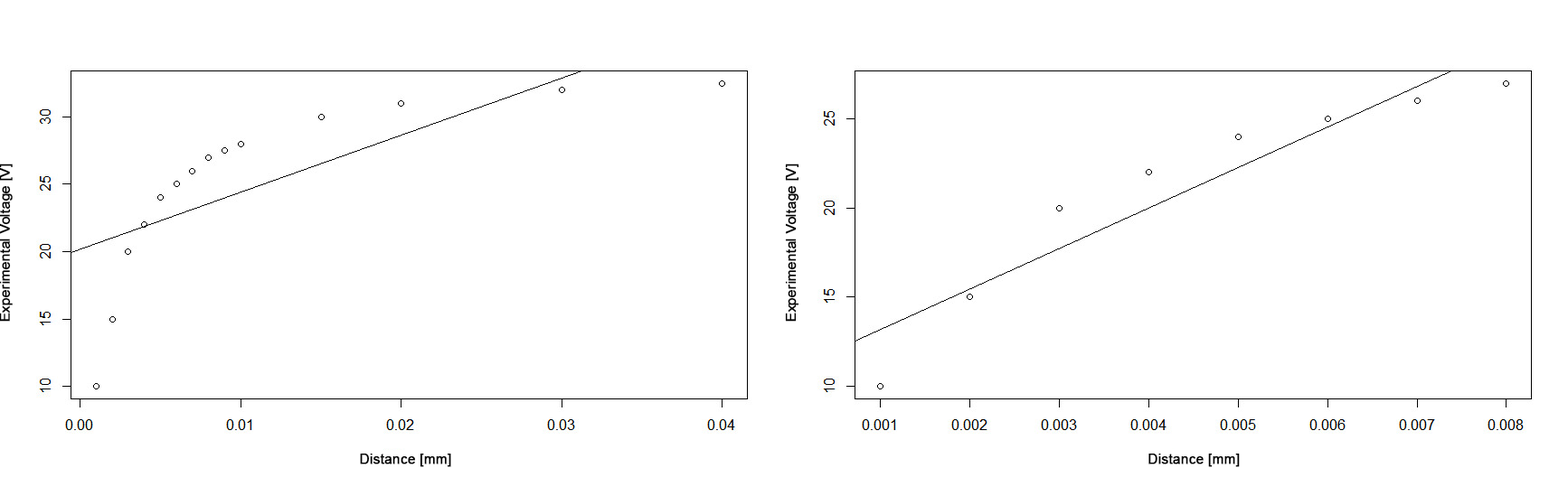
<style>
.page{position:relative;width:1568px;height:487px;background:#ffffff}
.page>*{position:absolute;margin:0}
.t1{font:13.6px "ArialMT";color:#000000;font-weight:bold}
.t2{font:13.7px "ArialMT";color:#000000;font-weight:bold}
</style>
<div class="page">
<p class="t1" style="left:0px;top:164px;width:13px;height:158px;rotate:-90deg">Experimental Voltage [V]</p>
<p class="t1" style="left:785px;top:164px;width:14px;height:158px;rotate:-90deg">Experimental Voltage [V]</p>
<p class="t2" style="left:360px;top:454px;width:91px;height:14px">Distance [mm]</p>
<p class="t2" style="left:1148px;top:454px;width:92px;height:14px">Distance [mm]</p>
</div>
